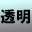
<style>
.page{position:relative;width:32px;height:32px}
.page>*{position:absolute;margin:0}
.t1{font:15.8px "HGSoeiKakugothicUB";color:#000000}
</style>
<div class="page">
<p class="t1" style="left:0px;top:9px;width:31px;height:15px">透明</p>
</div>
